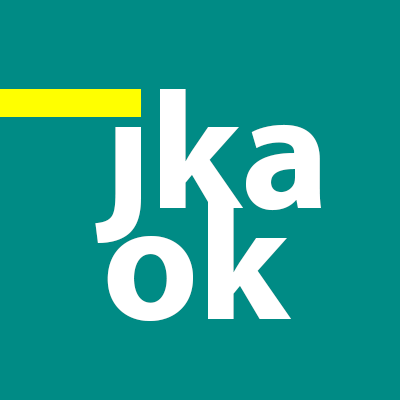
<style>
.page{position:relative;width:400px;height:400px;background:#008b85}
.page>*{position:absolute;margin:0}
.t1{font:167.1px/111.4px "MyriadPro-Bold";color:#ffffff}
</style>
<div class="page">
<p class="t1" style="left:95px;top:89px;width:226px;height:232px">jka<br>ok</p>
</div>
